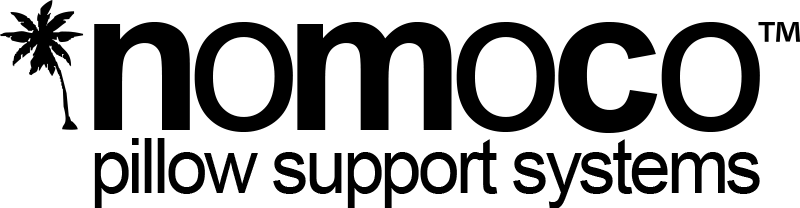
<style>
.page{position:relative;width:800px;height:208px;background:#ffffff}
.page>*{position:absolute;margin:0}
.t1{font:203.1px "Arial-BoldMT";letter-spacing:-0.075em;color:#000000}
.t2{font:203.1px "ArialMT";letter-spacing:-0.075em;color:#000000}
.t3{font:77.1px "ArialMT";letter-spacing:-0.05em;color:#000000;scale:0.97 1}
</style>
<div class="page">
<p class="t1" style="left:94px;top:22px;width:666px;height:111px">n<span class="t2">o</span>m<span class="t2">o </span>c <span class="t2">o</span></p>
<p class="t3" style="left:94px;top:138px;width:666px;height:71px">pillow support systems</p>
</div>
